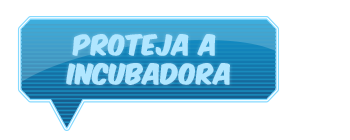
<style>
.page{position:relative;width:350px;height:140px;background:#ffffff}
.page>*{position:absolute;margin:0}
.t1{font:24px "KomikaAxis";color:#b0e6ff;font-weight:bold}
</style>
<div class="page">
<p class="t1" style="left:66px;top:34px;width:164px;height:51px;text-align:center">PROTEJA A <br>INCUBADORA</p>
</div>
